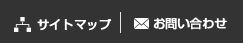
<style>
.page{position:relative;width:243px;height:43px;background:#333333}
.page>*{position:absolute;margin:0}
.t1{font:12px "ShinGoPro-Regular";color:#ffffff;font-weight:bold}
</style>
<div class="page">
<p class="t1" style="left:153px;top:17px;width:74px;height:13px">お問い合わせ</p>
<p class="t1" style="left:37px;top:19px;width:75px;height:12px">サイトマップ</p>
</div>
